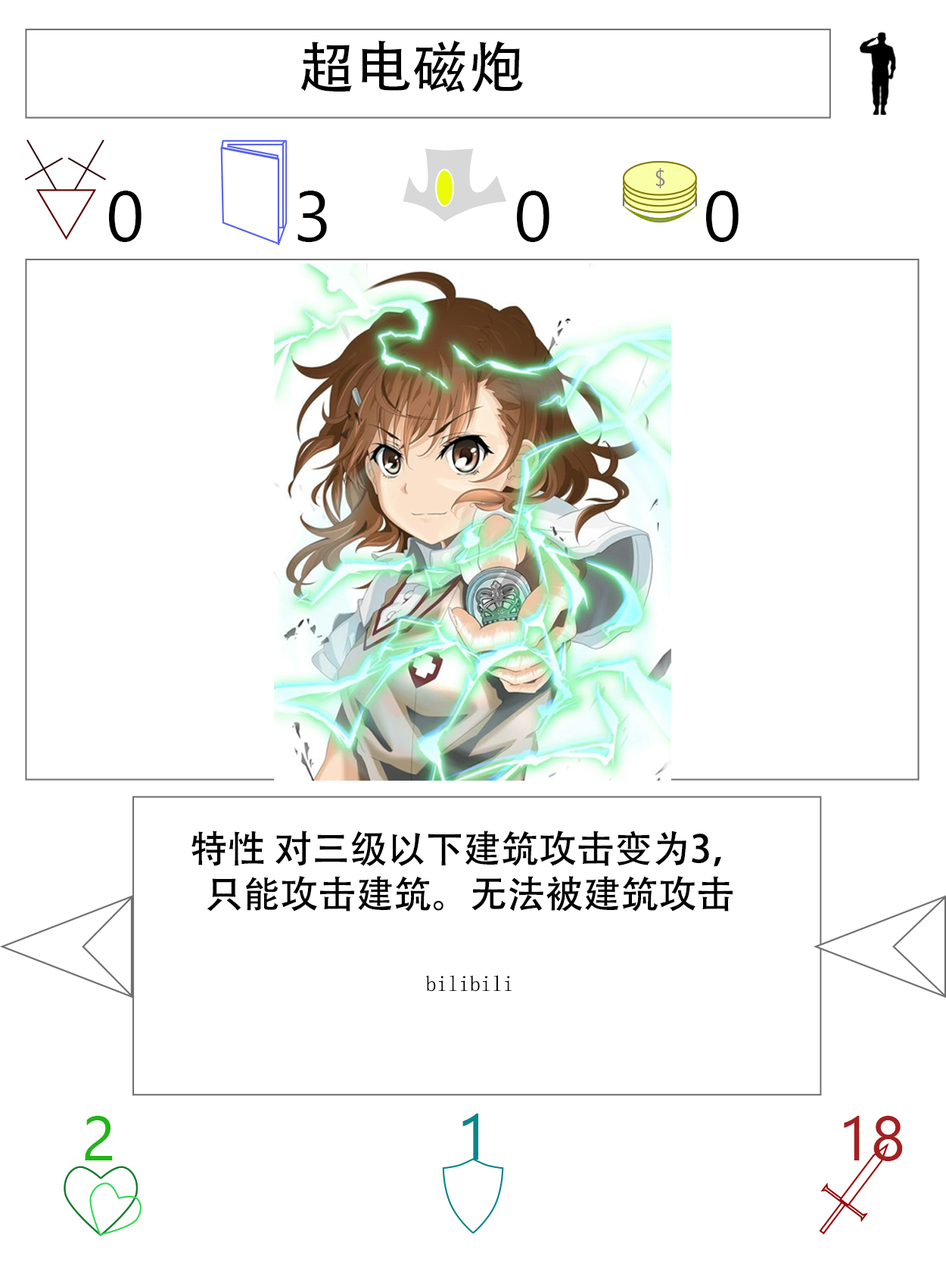
<style>
.page{position:relative;width:946px;height:1261px;background:#ffffff}
.page>*{position:absolute;margin:0}
.t1{font:56.7px "AdobeHeitiStd-Regular";color:#000000}
.t2{font:70.9px "SegoeUI";color:#000000}
.t3{font:37.8px "AdobeHeitiStd-Regular";color:#000000}
.t4{font:22.1px "NSimSun";color:#000000}
.t5{font:63px "SegoeUI";color:#22b518}
.t6{font:64.6px "SegoeUI";color:#05868a}
.t7{font:63px "SegoeUI";color:#a32020}
</style>
<div class="page">
<p class="t1" style="left:300px;top:40px;width:223px;height:52px">超电磁炮</p>
<p class="t2" style="left:109px;top:191px;width:32px;height:51px">0</p>
<p class="t2" style="left:297px;top:191px;width:30px;height:51px">3</p>
<p class="t2" style="left:517px;top:191px;width:32px;height:51px">0</p>
<p class="t2" style="left:706px;top:191px;width:32px;height:51px">0</p>
<p class="t3" style="left:191px;top:831px;width:541px;height:161px;text-align:center">特性 对三级以下建筑攻击变为3，只能攻击建筑。无法被建筑攻击<br><br><span class="t4">bilibili</span></p>
<p class="t5" style="left:85px;top:1116px;width:28px;height:44px">2</p>
<p class="t6" style="left:462px;top:1114px;width:16px;height:46px">1</p>
<p class="t7" style="left:843px;top:1116px;width:59px;height:45px">18</p>
</div>
